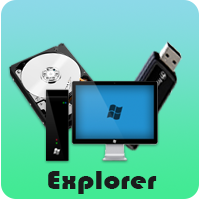
<style>
.page{position:relative;width:199px;height:200px}
.page>*{position:absolute;margin:0}
.t1{font:27.1px "Bauhaus93";color:#1b1b1c;scale:1.11 1}
</style>
<div class="page">
<p class="t1" style="left:48px;top:171px;width:109px;height:23px">Explorer</p>
</div>
